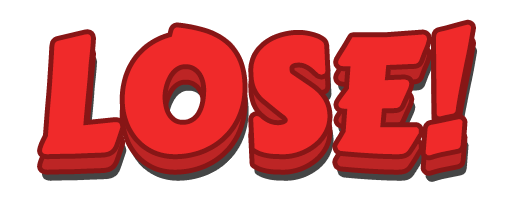
<style>
.page{position:relative;width:512px;height:200px;background:#ffffff}
.page>*{position:absolute;margin:0}
.t1{font:154.8px "CarterOne";color:#f02a2a;text-transform:uppercase;font-weight:bold}
</style>
<div class="page">
<p class="t1" style="left:42px;top:24px;width:429px;height:132px">Lose!</p>
<p class="t1" style="left:42px;top:40px;width:429px;height:131px">Lose!</p>
</div>
